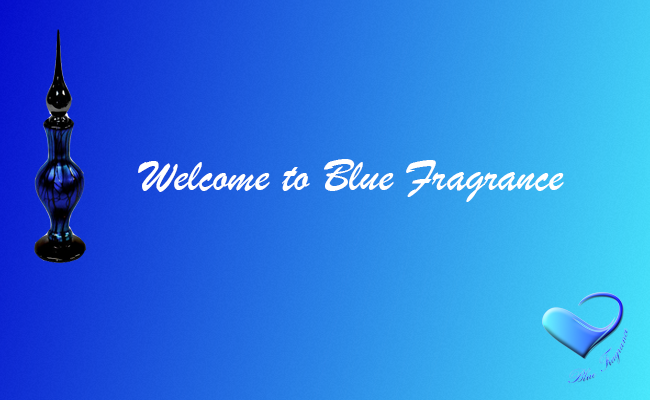
<style>
.page{position:relative;width:650px;height:400px}
.page>*{position:absolute;margin:0}
.t1{font:48px "BrushScriptMT";color:#ffffff}
</style>
<div class="page">
<p class="t1" style="left:138px;top:159px;width:426px;height:43px">Welcome to Blue Fragrance</p>
</div>
